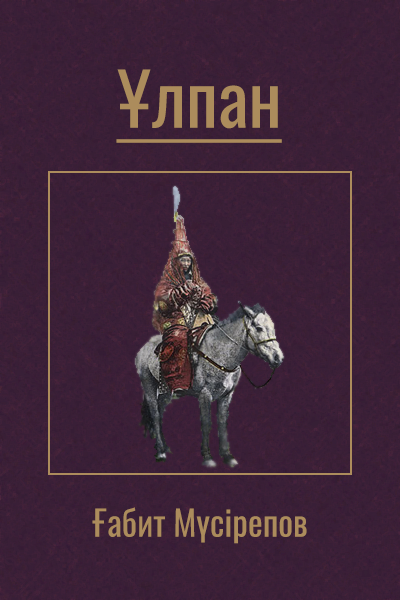
<style>
.page{position:relative;width:400px;height:600px}
.page>*{position:absolute;margin:0}
.t1{font:72px "Oswald-Regular";color:#ac8c5c;text-decoration:underline}
.t2{font:35px "Oswald-Regular";color:#ac8c5c}
</style>
<div class="page">
<p class="t1" style="left:116px;top:69px;width:166px;height:74px">Ұлпан</p>
<p class="t2" style="left:92px;top:507px;width:215px;height:37px">Ғабит Мүсірепов</p>
</div>
